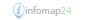
<style>
.page{position:relative;width:85px;height:20px;background:#ffffff}
.page>*{position:absolute;margin:0}
.t1{font:10px "Tahoma";color:#bbbbbb}
</style>
<div class="page">
<p class="t1" style="left:25px;top:6px;width:47px;height:10px">infomap24</p>
</div>
